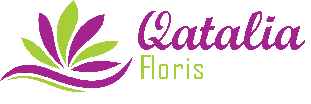
<style>
.page{position:relative;width:311px;height:104px;background:#ffffff}
.page>*{position:absolute;margin:0}
.t1{font:54.6px "ScriptMTBold";color:#a3248f}
.t2{font:30.6px "AgencyFB-Reg";color:#a6ce39;scale:1.24 1}
</style>
<div class="page">
<p class="t1" style="left:138px;top:11px;width:167px;height:39px">Qatalia</p>
<p class="t2" style="left:141px;top:55px;width:62px;height:24px">Floris</p>
</div>
